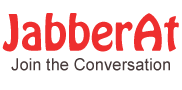
<style>
.page{position:relative;width:182px;height:90px;background:#ffffff}
.page>*{position:absolute;margin:0}
.t1{font:44.1px "HoboStd";color:#ee2e2e}
.t2{font:16.5px "ArialMT";color:#463a3a}
</style>
<div class="page">
<p class="t1" style="left:2px;top:13px;width:177px;height:39px">JabberAt</p>
<p class="t2" style="left:11px;top:58px;width:159px;height:13px">Join the Conversation</p>
</div>
